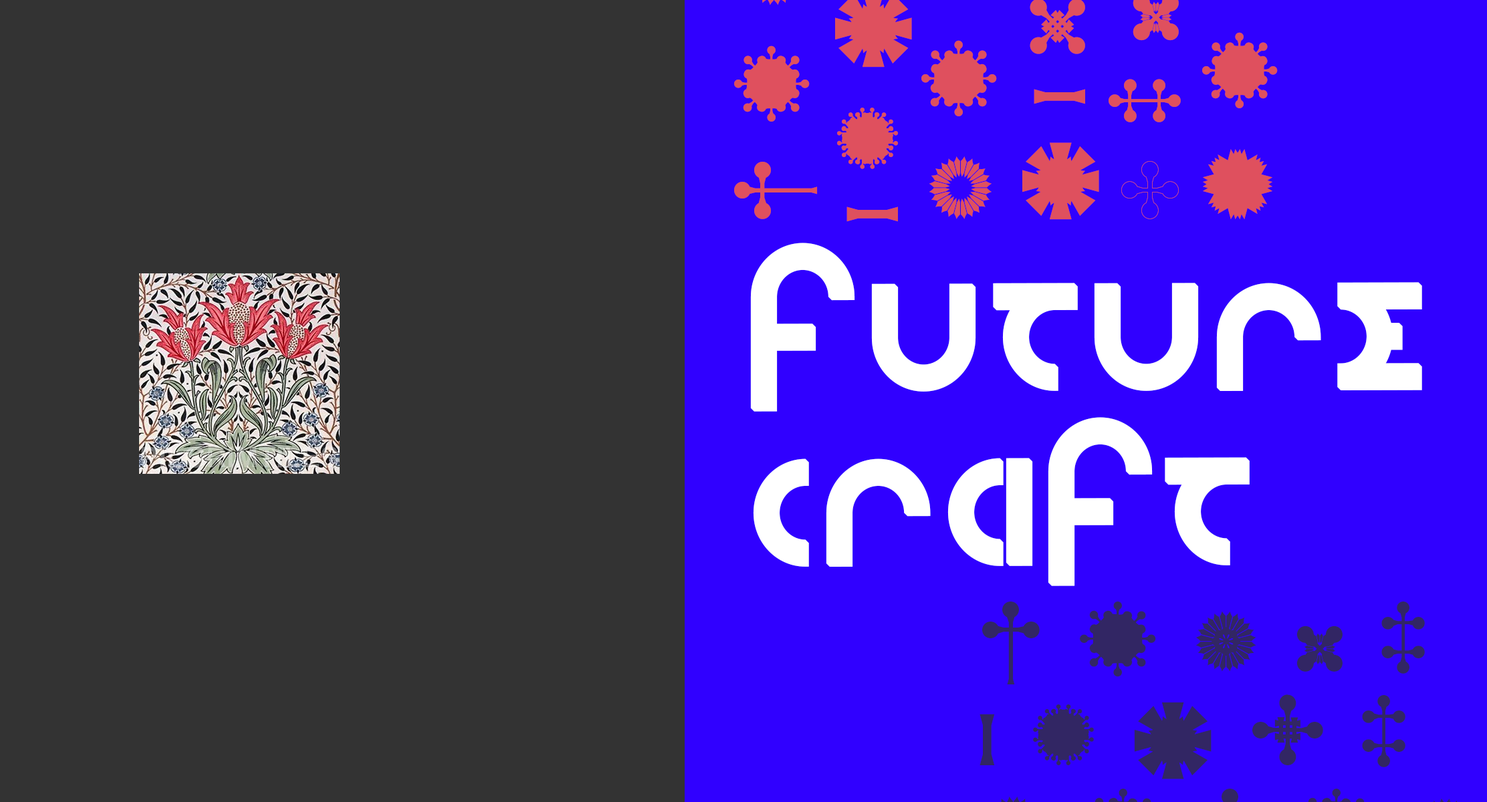
<style>
.page{position:relative;width:1487px;height:802px;background:#3000ff}
.page>*{position:absolute;margin:0}
.t1{font:299.1px/174.7px "hngl";letter-spacing:-0.04em;color:#ffffff;text-transform:uppercase;font-weight:bold;scale:0.96 1}
</style>
<div class="page">
<p class="t1" style="left:750px;top:243px;width:672px;height:343px">Future<br>Craft</p>
</div>
